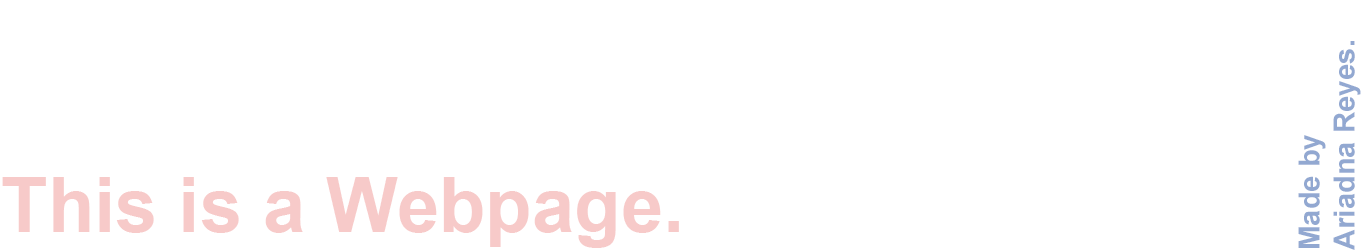
<style>
.page{position:relative;width:1366px;height:250px;background:#ffffff}
.page>*{position:absolute;margin:0}
.t1{font:29.2px "Arial-BoldMT";color:#92a8d1}
.t2{font:76px "Arial-BoldMT";color:#f7cac9}
</style>
<div class="page">
<p class="t1" style="left:1298px;top:41px;width:63px;height:209px;rotate:-90deg">Made by <br>Ariadna Reyes.</p>
<p class="t2" style="left:2px;top:177px;width:677px;height:71px">This is a Webpage.</p>
</div>
